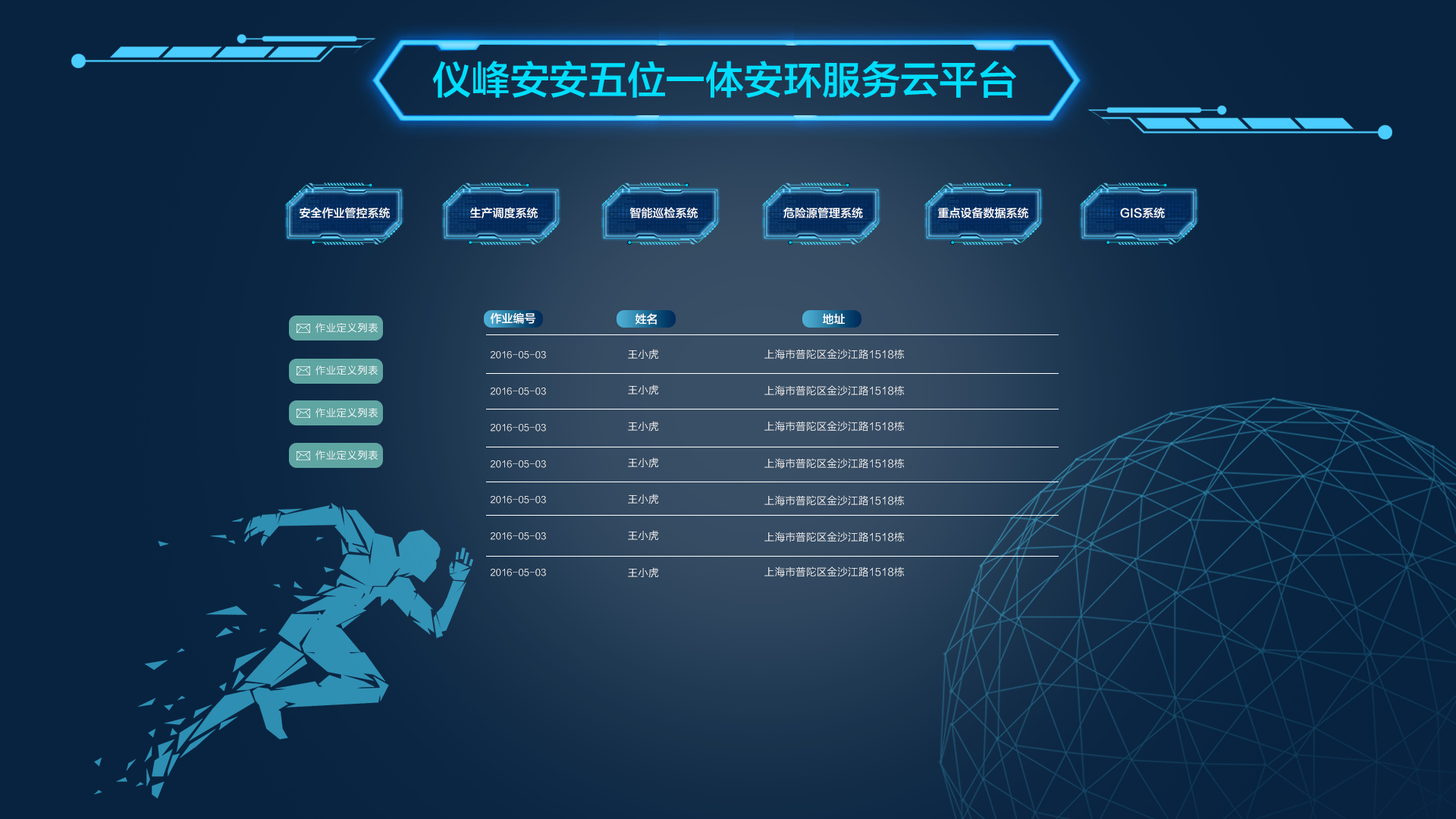
<style>
.page{position:relative;width:1456px;height:819px;background:#072340}
.page>*{position:absolute;margin:0}
.t1{font:39px "FZLTZHJW--GB1-0";color:#00deff;text-transform:uppercase}
.t2{font:11.4px "FZLTZHJW--GB1-0";color:#ffffff;text-transform:uppercase}
.t3{font:10.3px "FZLTXHK";letter-spacing:0.02em;color:#ffffff;text-transform:uppercase}
.t4{font:9.1px "FZLTXHK";color:#ffffff;text-transform:uppercase}
.t5{font:10.4px "FZLTXHK";color:#ffffff;text-transform:uppercase}
</style>
<div class="page">
<p class="t1" style="left:433px;top:61px;width:583px;height:37px">仪峰安安五位一体安环服务云平台</p>
<p class="t2" style="left:300px;top:207px;width:90px;height:11px">安全作业管控系统</p>
<p class="t2" style="left:470px;top:207px;width:68px;height:11px">生产调度系统</p>
<p class="t2" style="left:630px;top:207px;width:68px;height:11px">智能巡检系统</p>
<p class="t2" style="left:783px;top:207px;width:80px;height:11px">危险源管理系统</p>
<p class="t2" style="left:938px;top:207px;width:90px;height:11px">重点设备数据系统</p>
<p class="t2" style="left:1120px;top:207px;width:45px;height:11px">GIS系统</p>
<p class="t2" style="left:490px;top:312px;width:45px;height:12px">作业编号</p>
<p class="t2" style="left:635px;top:313px;width:22px;height:12px">姓名</p>
<p class="t2" style="left:823px;top:313px;width:22px;height:12px">地址</p>
<p class="t3" style="left:315px;top:323px;width:63px;height:10px">作业定义列表</p>
<p class="t4" style="left:491px;top:351px;width:55px;height:8px">2016-05-03</p>
<p class="t5" style="left:628px;top:349px;width:31px;height:10px">王小虎</p>
<p class="t5" style="left:764px;top:349px;width:141px;height:10px">上海市普陀区金沙江路1518栋</p>
<p class="t3" style="left:315px;top:366px;width:63px;height:9px">作业定义列表</p>
<p class="t4" style="left:491px;top:388px;width:55px;height:7px">2016-05-03</p>
<p class="t5" style="left:628px;top:384px;width:31px;height:11px">王小虎</p>
<p class="t5" style="left:764px;top:385px;width:141px;height:11px">上海市普陀区金沙江路1518栋</p>
<p class="t3" style="left:315px;top:408px;width:63px;height:10px">作业定义列表</p>
<p class="t4" style="left:491px;top:424px;width:55px;height:7px">2016-05-03</p>
<p class="t5" style="left:628px;top:421px;width:31px;height:10px">王小虎</p>
<p class="t5" style="left:764px;top:421px;width:141px;height:10px">上海市普陀区金沙江路1518栋</p>
<p class="t3" style="left:315px;top:450px;width:63px;height:10px">作业定义列表</p>
<p class="t4" style="left:491px;top:460px;width:55px;height:8px">2016-05-03</p>
<p class="t5" style="left:628px;top:457px;width:31px;height:11px">王小虎</p>
<p class="t5" style="left:764px;top:458px;width:141px;height:11px">上海市普陀区金沙江路1518栋</p>
<p class="t4" style="left:491px;top:496px;width:55px;height:8px">2016-05-03</p>
<p class="t5" style="left:628px;top:494px;width:31px;height:10px">王小虎</p>
<p class="t5" style="left:764px;top:495px;width:141px;height:11px">上海市普陀区金沙江路1518栋</p>
<p class="t4" style="left:491px;top:532px;width:55px;height:8px">2016-05-03</p>
<p class="t5" style="left:628px;top:530px;width:31px;height:11px">王小虎</p>
<p class="t5" style="left:764px;top:532px;width:141px;height:10px">上海市普陀区金沙江路1518栋</p>
<p class="t4" style="left:491px;top:569px;width:55px;height:7px">2016-05-03</p>
<p class="t5" style="left:628px;top:567px;width:31px;height:11px">王小虎</p>
<p class="t5" style="left:764px;top:566px;width:141px;height:11px">上海市普陀区金沙江路1518栋</p>
</div>
